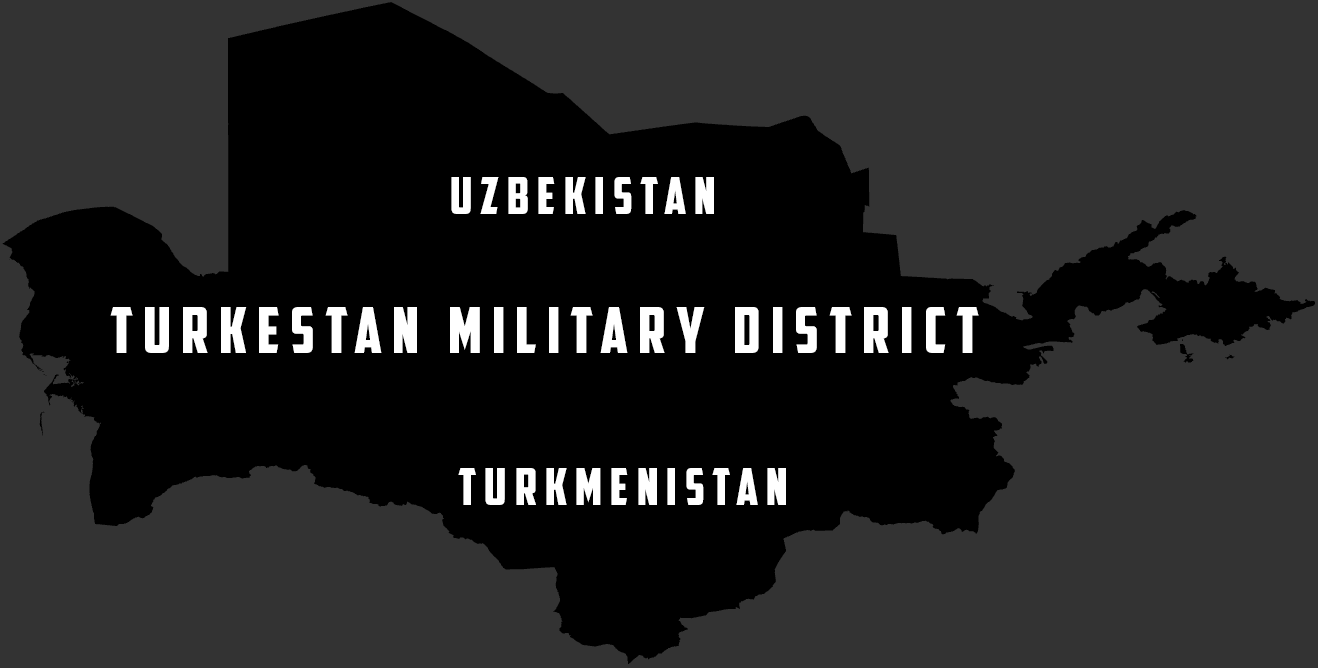
<style>
.page{position:relative;width:1318px;height:668px;background:#333333}
.page>*{position:absolute;margin:0}
.t1{font:51px "AmericanCaptain";letter-spacing:0.16em;color:#ffffff}
.t2{font:64px "AmericanCaptain";letter-spacing:0.16em;color:#ffffff}
</style>
<div class="page">
<p class="t1" style="left:451px;top:177px;width:263px;height:37px">uzbekistan</p>
<p class="t2" style="left:110px;top:307px;width:869px;height:46px">turkestan military district</p>
<p class="t1" style="left:458px;top:468px;width:328px;height:37px">turkmenistan</p>
</div>
